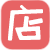
<style>
.page{position:relative;width:50px;height:50px;background:#e76364}
.page>*{position:absolute;margin:0}
.t1{font:45px "HappyZcool";letter-spacing:0.02em;color:#ffffff}
</style>
<div class="page">
<p class="t1" style="left:7px;top:5px;width:36px;height:36px">店</p>
</div>
